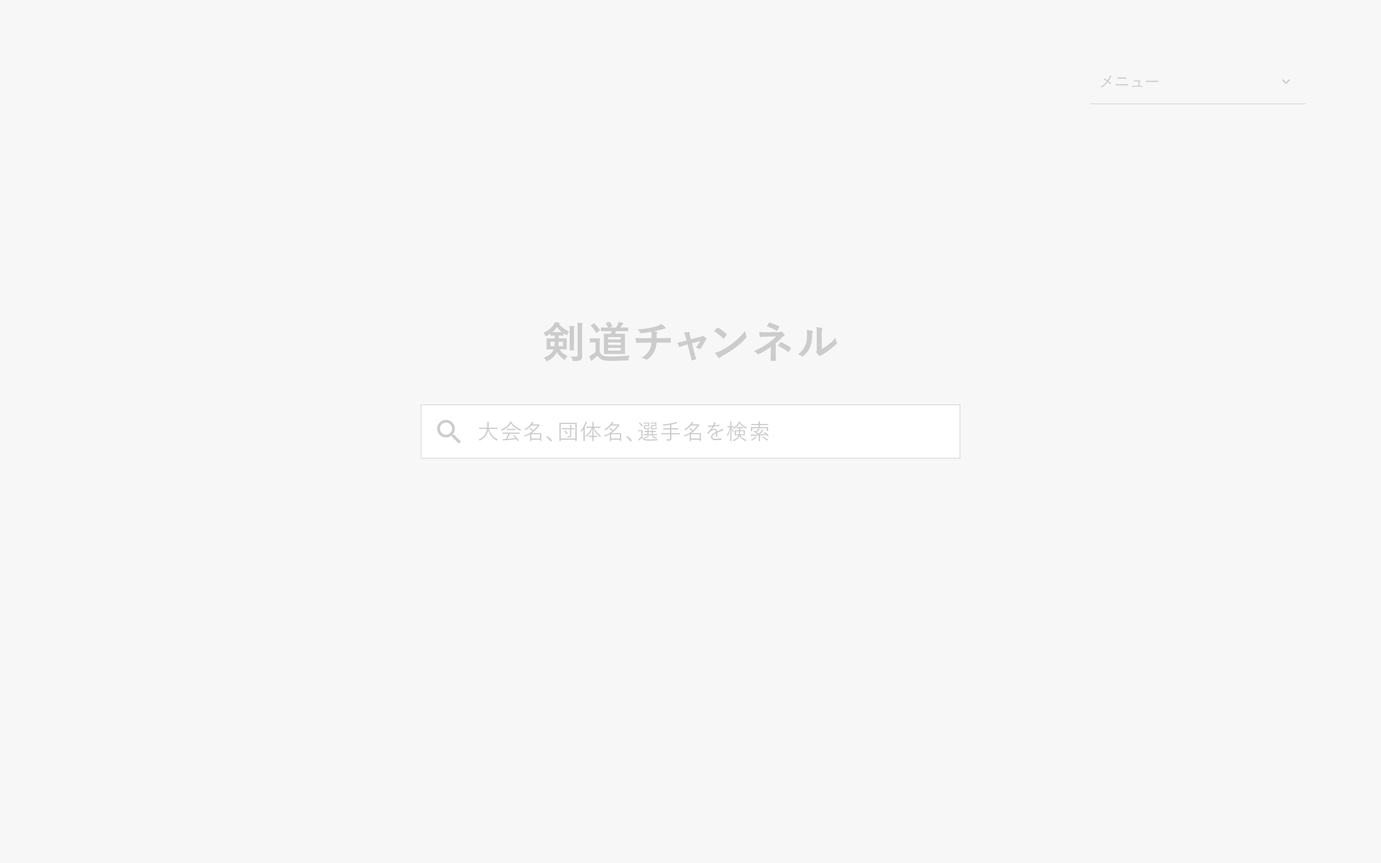
<style>
.page{position:relative;width:1381px;height:863px;background:#f7f7f7}
.page>*{position:absolute;margin:0}
.t1{font:16.2px "YuGo-Medium";letter-spacing:0.05em;color:#cccccc}
.t2{font:43.2px "YuGo-Bold";letter-spacing:0.05em;color:#cccccc}
.t3{font:21.6px "YuGo-Medium";letter-spacing:0.05em;color:#cccccc}
</style>
<div class="page">
<p class="t1" style="left:1101px;top:75px;width:58px;height:13px">メニュー</p>
<p class="t2" style="left:543px;top:322px;width:294px;height:40px">剣道チャンネル</p>
<p class="t3" style="left:479px;top:421px;width:290px;height:21px">大会名、団体名、選手名を検索</p>
</div>
